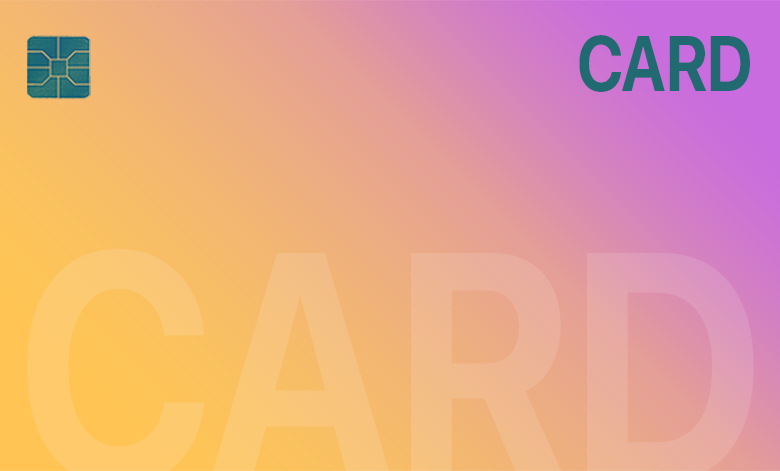
<style>
.page{position:relative;width:780px;height:471px}
.page>*{position:absolute;margin:0}
.t1{font:78.1px "SFProDisplay-Bold";color:#226a71;scale:0.83 1}
</style>
<div class="page">
<p class="t1" style="left:579px;top:35px;width:171px;height:57px">CARD</p>
</div>
